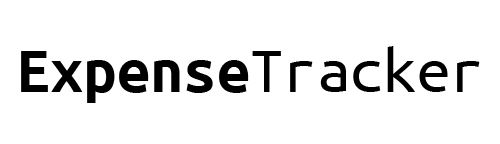
<style>
.page{position:relative;width:500px;height:144px;background:#ffffff}
.page>*{position:absolute;margin:0}
.t1{font:66.7px "UbuntuMono-Bold";color:#000000}
.t2{font:66.7px "UbuntuMono-Regular";color:#000000}
</style>
<div class="page">
<p class="t1" style="left:21px;top:46px;width:459px;height:57px">Expense<span class="t2">Tracker</span></p>
</div>
